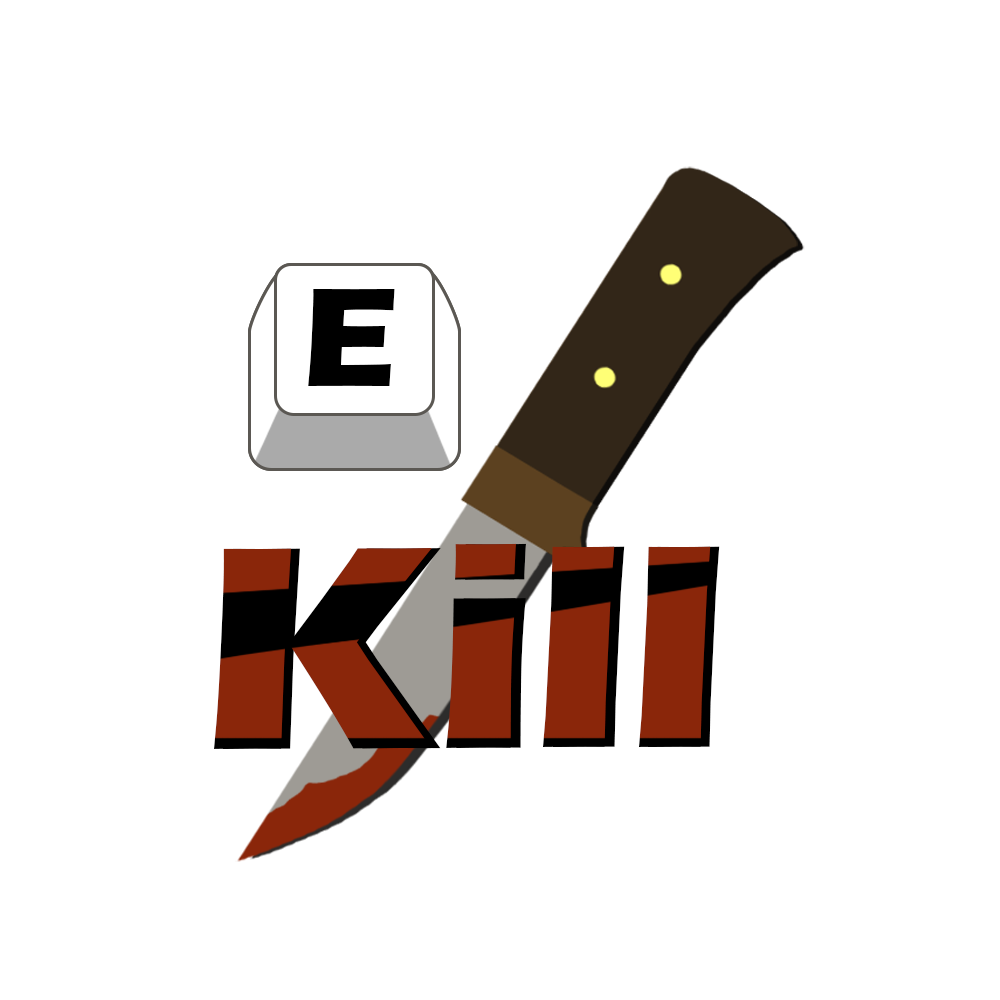
<style>
.page{position:relative;width:1000px;height:1000px;background:#ffffff}
.page>*{position:absolute;margin:0}
.t1{font:144.7px "ErasITC-Bold";color:#000000}
.t2{font:299.9px "ErasITC-Bold";color:#8a260a}
.t3{font:299.9px "ErasITC-Bold"}
</style>
<div class="page">
<p class="t1" style="left:308px;top:289px;width:87px;height:97px">E</p>
<p class="t1" style="left:308px;top:289px;width:87px;height:97px">E</p>
<p class="t2" style="left:214px;top:543px;width:497px;height:206px">Kill</p>
<p class="t3" style="left:223px;top:543px;width:497px;height:206px">Kill</p>
</div>
